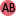
<style>
.page{position:relative;width:16px;height:16px;background:#e16271}
.page>*{position:absolute;margin:0}
.t1{font:12px "MyriadPro-Regular";color:#060606}
</style>
<div class="page">
<p class="t1" style="left:2px;top:3px;width:13px;height:9px">AB</p>
</div>
